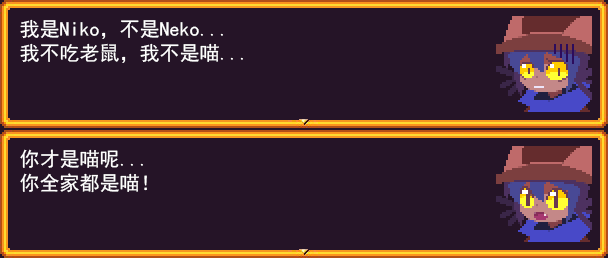
<style>
.page{position:relative;width:608px;height:258px;background:#251427}
.page>*{position:absolute;margin:0}
.t1{font:20px/24px "SimHei";color:#ffffff}
</style>
<div class="page">
<p class="t1" style="left:20px;top:19px;width:223px;height:44px">我是Niko，不是Neko...<br>我不吃老鼠，我不是喵...</p>
<p class="t1" style="left:20px;top:149px;width:127px;height:44px">你才是喵呢...<br>你全家都是喵！</p>
</div>
